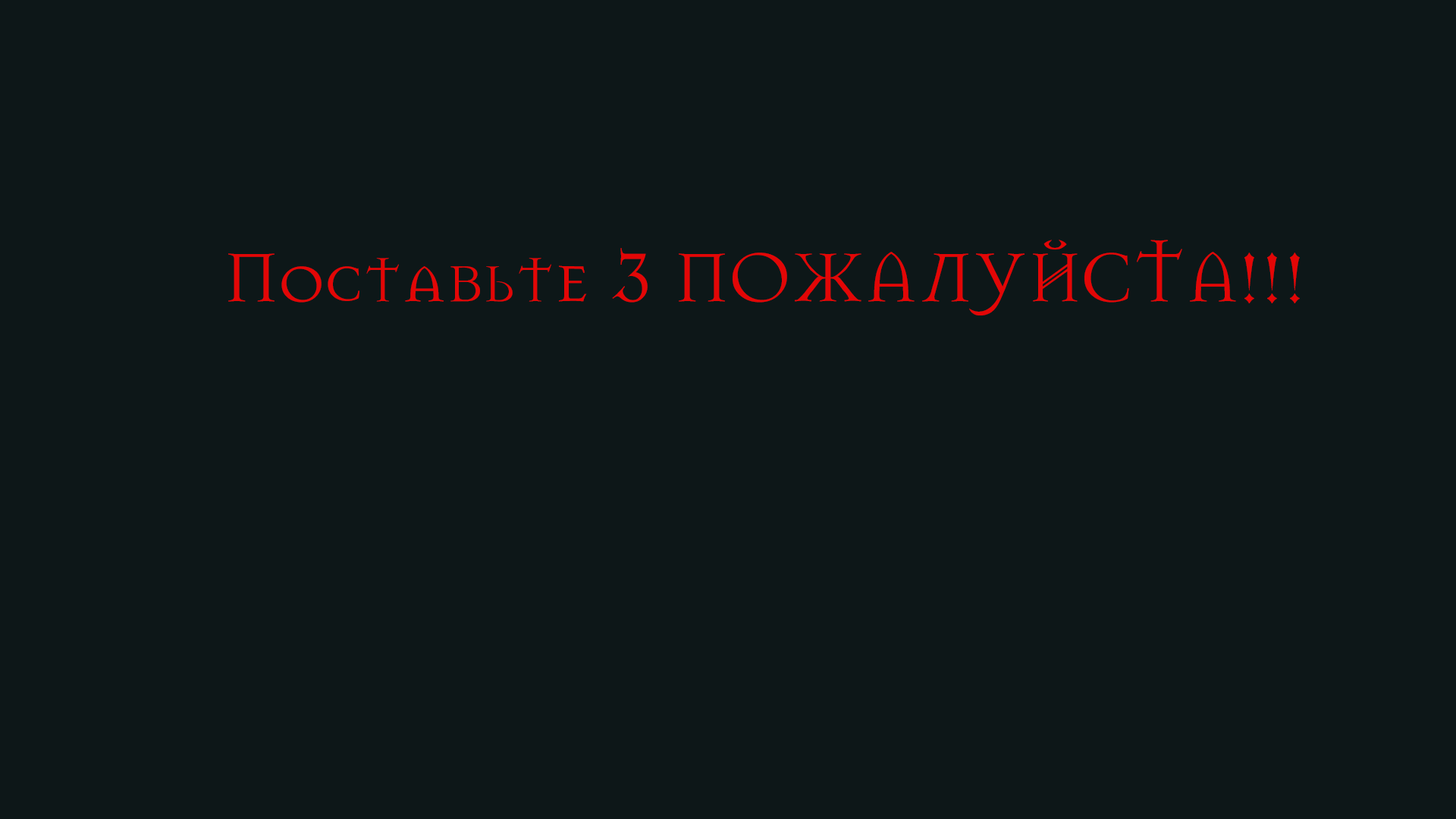
<style>
.page{position:relative;width:1456px;height:819px;background:#0d1718}
.page>*{position:absolute;margin:0}
.t1{font:75.8px "MasonChronicles";color:#e30606}
</style>
<div class="page">
<p class="t1" style="left:228px;top:240px;width:1072px;height:75px">Поставьте 3 ПОЖАЛУЙСТА!!!</p>
</div>
